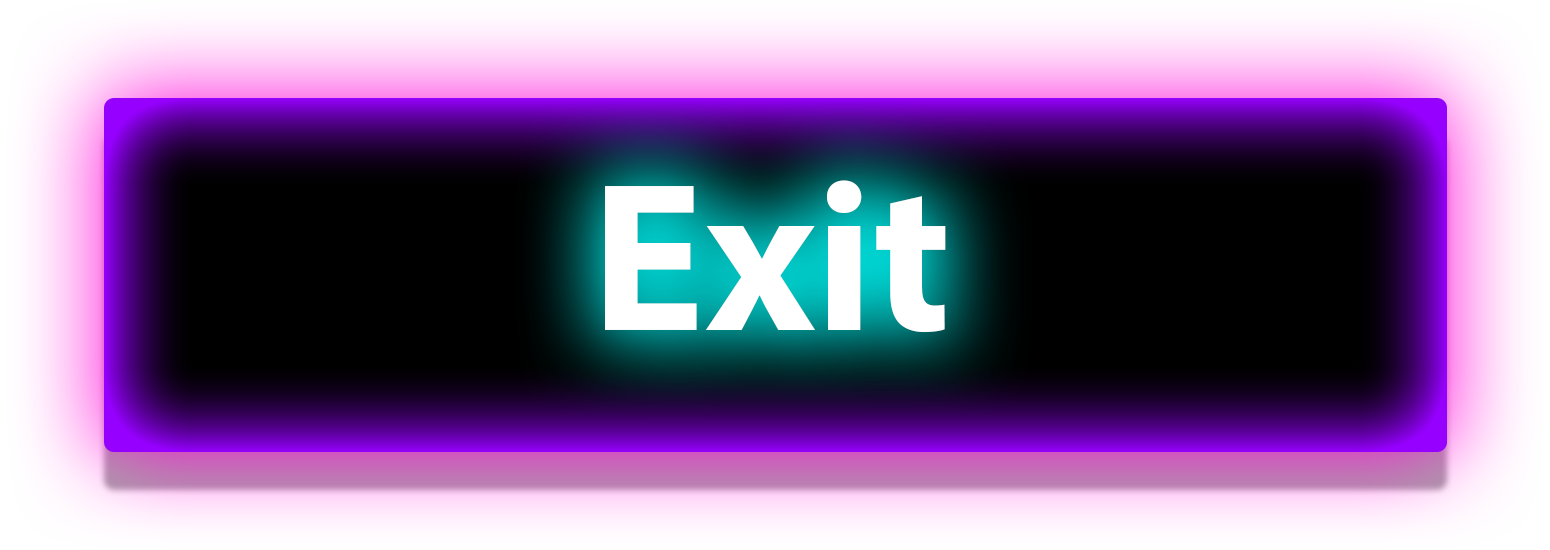
<style>
.page{position:relative;width:1550px;height:550px}
.page>*{position:absolute;margin:0}
.t1{font:212.9px "MyriadPro-Bold";color:#ffffff}
</style>
<div class="page">
<p class="t1" style="left:605px;top:180px;width:341px;height:153px">Exit</p>
</div>
